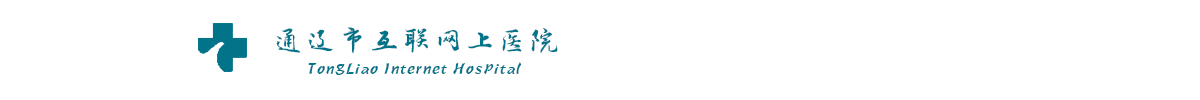
<style>
.page{position:relative;width:1200px;height:100px;background:#ffffff}
.page>*{position:absolute;margin:0}
.t1{font:32px "FZZJ-LJDFONT";color:#017489}
.t2{font:21.8px "STBaoli-SC-Regular";color:#017489;scale:0.83 1}
</style>
<div class="page">
<p class="t1" style="left:276px;top:27px;width:282px;height:27px">通辽市互联网上医院</p>
<p class="t2" style="left:308px;top:62px;width:214px;height:13px">TongLiao Internet Hospital</p>
</div>
